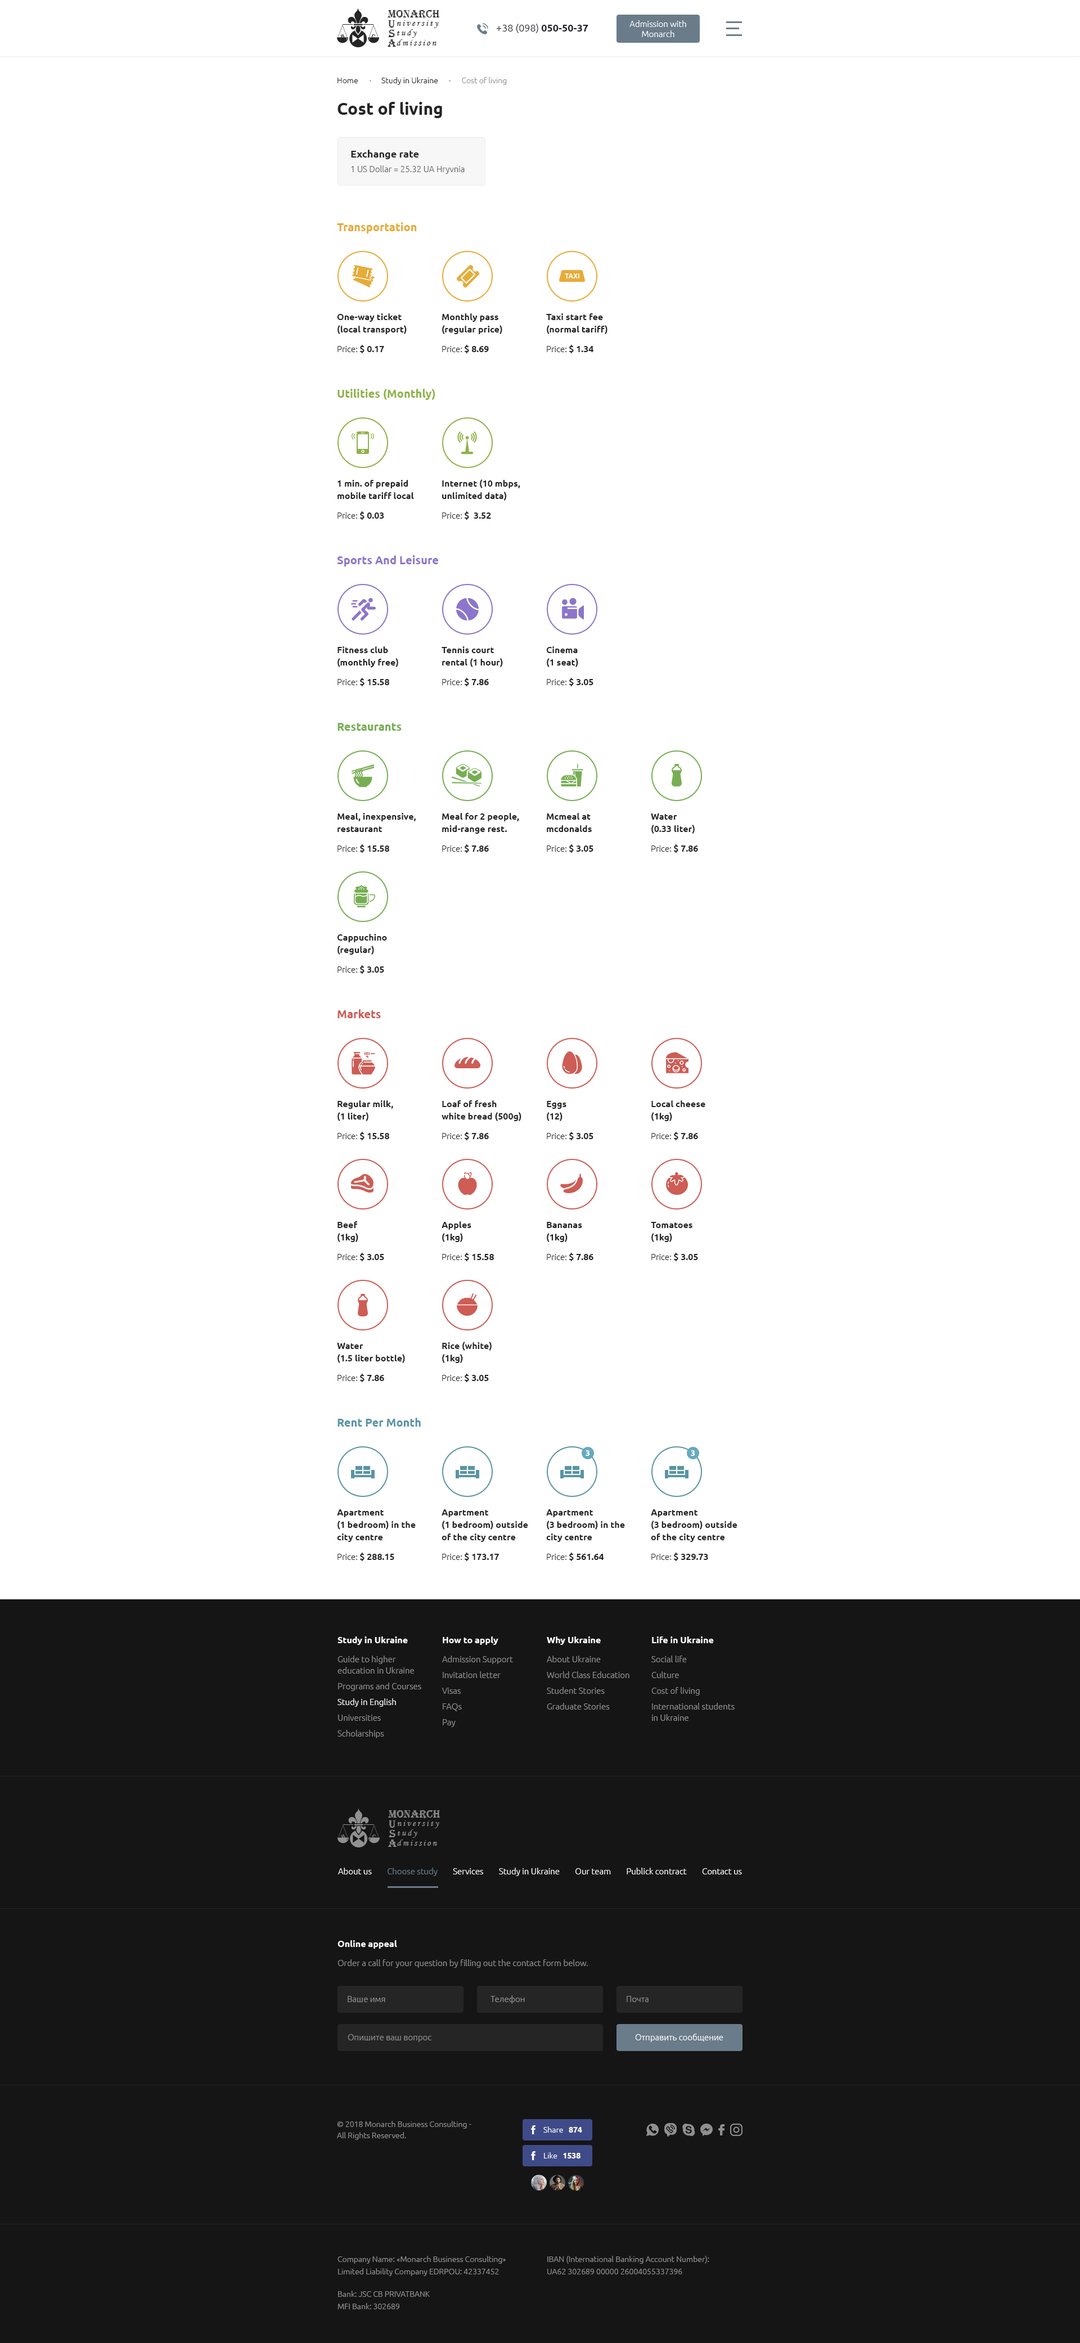
<style>
.page{position:relative;width:1080px;height:2343px;background:#ffffff}
.page>*{position:absolute;margin:0}
.t1{font:11.3px "Algerian";color:#252525}
.t2{font:9px "MonotypeCorsiva";letter-spacing:0.19em;color:#252525}
.t3{font:10.1px "Ubuntu-Light";color:#242028}
.t4{font:10.1px "Ubuntu-Bold";color:#242028}
.t5{font:8.4px/10.1px "Ubuntu-Light";color:#ffffff}
.t6{font:7.9px "Ubuntu-Light";color:#202020}
.t7{font:7.9px "Ubuntu-Light";color:#909090}
.t8{font:16.9px "Ubuntu-Bold";color:#252525}
.t9{font:8.4px/14.6px "Ubuntu-Light";color:#606060}
.t10{font:10.1px/14.6px "Ubuntu-Bold";color:#252525}
.t11{font:11.2px "Ubuntu-Bold";color:#e7ab38}
.t12{font:9px/12.4px "Ubuntu-Bold";color:#252525}
.t13{font:8.4px "Ubuntu-Light";color:#252525}
.t14{font:9px "Ubuntu-Bold";color:#252525}
.t15{font:11.2px "Ubuntu-Bold";color:#90b248}
.t16{font:11.2px "Ubuntu-Bold";color:#8c75cb}
.t17{font:11.2px "Ubuntu-Bold";color:#77ae54}
.t18{font:11.2px "Ubuntu-Bold";color:#cd5d55}
.t19{font:11.2px "Ubuntu-Bold";color:#5995a6}
.t20{font:7.9px "Ubuntu-Bold";color:#ffffff}
.t21{font:8.4px/15.8px "Ubuntu-Light";color:#909090}
.t22{font:9px/11.2px "Ubuntu-Bold";color:#ffffff}
.t23{font:8.4px/19.1px "Ubuntu-Light";color:#909090}
.t24{font:8.4px/11.2px "Ubuntu-Light";color:#909090}
.t25{font:8.4px/15.8px "Ubuntu-Light";color:#ffffff}
.t26{font:11.3px "Algerian";color:#909090}
.t27{font:9px "MonotypeCorsiva";letter-spacing:0.19em;color:#909090}
.t28{font:8.4px "Ubuntu-Light";color:#ffffff}
.t29{font:8.4px "Ubuntu-Light";color:#6a7c8a}
.t30{font:8.4px "Ubuntu-Light";color:#909090}
.t31{font:7.9px/11.2px "Ubuntu-Light";color:#909090}
.t32{font:7.9px "Ubuntu-Light";color:#ffffff}
.t33{font:7.9px/12.4px "Ubuntu-Light";color:#909090}
</style>
<div class="page">
<p class="t1" style="left:388px;top:10px;width:52px;height:9px">MONARCH</p>
<p class="t1" style="left:388px;top:30px;width:7px;height:7px">S</p>
<p class="t1" style="left:388px;top:20px;width:7px;height:8px">U</p>
<p class="t2" style="left:397px;top:20px;width:42px;height:8px">niversity</p>
<p class="t2" style="left:397px;top:29px;width:20px;height:9px">tudy</p>
<p class="t3" style="left:496px;top:24px;width:92px;height:9px">+38 (098) <span class="t4">050-50-37</span></p>
<p class="t5" style="left:629px;top:20px;width:57px;height:17px;text-align:center">Admission with <br>Monarch</p>
<p class="t1" style="left:388px;top:39px;width:9px;height:8px">A</p>
<p class="t2" style="left:397px;top:39px;width:39px;height:7px">dmission</p>
<p class="t6" style="left:338px;top:77px;width:169px;height:8px">Home             Study in Ukraine             <span class="t7">Cost of living</span></p>
<p class="t8" style="left:338px;top:102px;width:104px;height:16px">Cost of living</p>
<p class="t9" style="left:351px;top:150px;width:114px;height:24px"><span class="t10">Exchange rate<br></span>1 US Dollar = 25.32 UA Hryvnia</p>
<p class="t11" style="left:337px;top:222px;width:80px;height:11px">Transportation</p>
<p class="t12" style="left:337px;top:313px;width:70px;height:21px">One-way ticket<br>(local transport)</p>
<p class="t12" style="left:442px;top:313px;width:60px;height:21px">Monthly pass<br>(regular price)</p>
<p class="t12" style="left:546px;top:313px;width:62px;height:21px">Taxi start fee<br>(normal tariff)</p>
<p class="t13" style="left:338px;top:345px;width:46px;height:8px">Price: <span class="t14">$ 0.17</span></p>
<p class="t13" style="left:442px;top:345px;width:47px;height:8px">Price: <span class="t14">$ 8.69</span></p>
<p class="t13" style="left:547px;top:345px;width:46px;height:8px">Price: <span class="t14">$ 1.34</span></p>
<p class="t15" style="left:338px;top:389px;width:97px;height:11px">Utilities (Monthly)</p>
<p class="t12" style="left:338px;top:480px;width:76px;height:19px">1 min. of prepaid<br>mobile tariff local</p>
<p class="t12" style="left:442px;top:479px;width:78px;height:22px">Internet (10 mbps,<br>unlimited data)</p>
<p class="t13" style="left:338px;top:511px;width:46px;height:9px">Price: <span class="t14">$ 0.03</span></p>
<p class="t14" style="left:442px;top:511px;width:49px;height:9px"><span class="t13">Price: </span>$  3.52</p>
<p class="t16" style="left:337px;top:555px;width:101px;height:11px">Sports And Leisure</p>
<p class="t12" style="left:338px;top:646px;width:60px;height:21px">Fitness club<br>(monthly free)</p>
<p class="t12" style="left:442px;top:646px;width:61px;height:21px">Tennis court<br>rental (1 hour)</p>
<p class="t12" style="left:546px;top:646px;width:32px;height:21px">Cinema<br>(1 seat)</p>
<p class="t14" style="left:338px;top:678px;width:51px;height:8px"><span class="t13">Price: </span>$ 15.58</p>
<p class="t13" style="left:442px;top:678px;width:47px;height:8px">Price: <span class="t14">$ 7.86</span></p>
<p class="t13" style="left:547px;top:678px;width:46px;height:8px">Price: <span class="t14">$ 3.05</span></p>
<p class="t17" style="left:338px;top:723px;width:64px;height:8px">Restaurants</p>
<p class="t12" style="left:338px;top:813px;width:78px;height:19px">Meal, inexpensive,<br>restaurant</p>
<p class="t12" style="left:442px;top:813px;width:77px;height:21px">Meal for 2 people,<br>mid-range rest.</p>
<p class="t12" style="left:547px;top:813px;width:45px;height:19px">Mcmeal at<br>mcdonalds</p>
<p class="t12" style="left:651px;top:813px;width:44px;height:21px">Water<br>(0.33 liter)</p>
<p class="t14" style="left:338px;top:844px;width:51px;height:9px"><span class="t13">Price: </span>$ 15.58</p>
<p class="t13" style="left:442px;top:844px;width:47px;height:9px">Price: <span class="t14">$ 7.86</span></p>
<p class="t13" style="left:547px;top:844px;width:46px;height:9px">Price: <span class="t14">$ 3.05</span></p>
<p class="t13" style="left:651px;top:844px;width:47px;height:9px">Price: <span class="t14">$ 7.86</span></p>
<p class="t12" style="left:337px;top:934px;width:50px;height:21px">Cappuchino<br>(regular)</p>
<p class="t13" style="left:338px;top:965px;width:46px;height:9px">Price: <span class="t14">$ 3.05</span></p>
<p class="t18" style="left:338px;top:1009px;width:43px;height:9px">Markets</p>
<p class="t12" style="left:338px;top:1100px;width:55px;height:21px">Regular milk,<br>(1 liter)</p>
<p class="t12" style="left:442px;top:1100px;width:79px;height:21px">Loaf of fresh<br>white bread (500g)</p>
<p class="t12" style="left:547px;top:1101px;width:19px;height:20px">Eggs <br>(12)</p>
<p class="t12" style="left:651px;top:1100px;width:54px;height:21px">Local cheese<br>(1kg)</p>
<p class="t14" style="left:338px;top:1132px;width:51px;height:8px"><span class="t13">Price: </span>$ 15.58</p>
<p class="t13" style="left:442px;top:1132px;width:47px;height:8px">Price: <span class="t14">$ 7.86</span></p>
<p class="t13" style="left:547px;top:1132px;width:46px;height:8px">Price: <span class="t14">$ 3.05</span></p>
<p class="t13" style="left:651px;top:1132px;width:47px;height:8px">Price: <span class="t14">$ 7.86</span></p>
<p class="t12" style="left:338px;top:1221px;width:20px;height:21px">Beef<br>(1kg)</p>
<p class="t12" style="left:442px;top:1221px;width:29px;height:21px">Apples<br>(1kg)</p>
<p class="t12" style="left:547px;top:1222px;width:35px;height:20px">Bananas<br>(1kg)</p>
<p class="t12" style="left:651px;top:1222px;width:41px;height:20px">Tomatoes<br>(1kg)</p>
<p class="t13" style="left:338px;top:1253px;width:46px;height:8px">Price: <span class="t14">$ 3.05</span></p>
<p class="t14" style="left:442px;top:1253px;width:52px;height:8px"><span class="t13">Price: </span>$ 15.58</p>
<p class="t13" style="left:547px;top:1253px;width:46px;height:8px">Price: <span class="t14">$ 7.86</span></p>
<p class="t13" style="left:651px;top:1253px;width:47px;height:8px">Price: <span class="t14">$ 3.05</span></p>
<p class="t12" style="left:337px;top:1343px;width:68px;height:20px">Water <br>(1.5 liter bottle)</p>
<p class="t12" style="left:442px;top:1342px;width:50px;height:21px">Rice (white)<br>(1kg)</p>
<p class="t13" style="left:338px;top:1374px;width:46px;height:8px">Price: <span class="t14">$ 7.86</span></p>
<p class="t13" style="left:442px;top:1374px;width:47px;height:8px">Price: <span class="t14">$ 3.05</span></p>
<p class="t19" style="left:338px;top:1418px;width:83px;height:8px">Rent Per Month</p>
<p class="t20" style="left:586px;top:1450px;width:4px;height:6px">3</p>
<p class="t20" style="left:691px;top:1450px;width:4px;height:6px">3</p>
<p class="t12" style="left:337px;top:1509px;width:79px;height:33px">Apartment <br>(1 bedroom) in the city centre</p>
<p class="t12" style="left:442px;top:1509px;width:86px;height:33px">Apartment <br>(1 bedroom) outside of the city centre</p>
<p class="t12" style="left:546px;top:1509px;width:79px;height:33px">Apartment <br>(3 bedroom) in the city centre</p>
<p class="t12" style="left:651px;top:1509px;width:86px;height:33px">Apartment <br>(3 bedroom) outside of the city centre</p>
<p class="t14" style="left:338px;top:1552px;width:56px;height:9px"><span class="t13">Price: </span>$ 288.15</p>
<p class="t14" style="left:442px;top:1552px;width:57px;height:9px"><span class="t13">Price: </span>$ 173.17</p>
<p class="t14" style="left:547px;top:1552px;width:57px;height:9px"><span class="t13">Price: </span>$ 561.64</p>
<p class="t14" style="left:651px;top:1552px;width:57px;height:9px"><span class="t13">Price: </span>$ 329.73</p>
<p class="t21" style="left:338px;top:1636px;width:83px;height:102px"><span class="t22">Study in Ukraine<br></span><span class="t23">Guide to higher <br></span><span class="t24">education in Ukraine<br></span>Programs and Courses<br><span class="t25">Study in English<br></span>Universities<br>Scholarships</p>
<p class="t21" style="left:442px;top:1636px;width:71px;height:91px"><span class="t22">How to apply<br></span><span class="t23">Admission Support<br></span>Invitation letter<br>Visas<br>FAQs<br>Pay</p>
<p class="t21" style="left:547px;top:1636px;width:82px;height:73px"><span class="t22">Why Ukraine<br></span><span class="t23">About Ukraine<br></span>World Class Education<br>Student Stories<br>Graduate Stories</p>
<p class="t21" style="left:651px;top:1636px;width:84px;height:85px"><span class="t22">Life in Ukraine<br></span><span class="t23">Social life<br></span>Culture<br>Cost of living<br>International students <br><span class="t24">in Ukraine</span></p>
<p class="t26" style="left:388px;top:1810px;width:52px;height:9px">MONARCH</p>
<p class="t26" style="left:389px;top:1830px;width:6px;height:7px">S</p>
<p class="t26" style="left:389px;top:1820px;width:6px;height:8px">U</p>
<p class="t27" style="left:397px;top:1820px;width:42px;height:8px">niversity</p>
<p class="t27" style="left:398px;top:1829px;width:19px;height:9px">tudy</p>
<p class="t26" style="left:388px;top:1839px;width:9px;height:8px">A</p>
<p class="t27" style="left:397px;top:1839px;width:40px;height:7px">dmission</p>
<p class="t28" style="left:338px;top:1868px;width:404px;height:8px">About us        <span class="t29">Choose study</span>        Services        Study in Ukraine        Our team        Publick contract        Contact us</p>
<p class="t23" style="left:338px;top:1940px;width:250px;height:28px"><span class="t22">Online appeal<br></span>Order a call for your question by filling out the contact form below.</p>
<p class="t30" style="left:348px;top:1996px;width:37px;height:6px">Ваше имя</p>
<p class="t30" style="left:490px;top:1995px;width:35px;height:9px">Телефон</p>
<p class="t30" style="left:627px;top:1996px;width:22px;height:6px">Почта</p>
<p class="t28" style="left:635px;top:2033px;width:88px;height:9px">Отправить сообщение</p>
<p class="t30" style="left:348px;top:2034px;width:83px;height:8px">Опишите ваш вопрос</p>
<p class="t31" style="left:337px;top:2121px;width:134px;height:19px">© 2018 Monarch Business Consulting - <br>All Rights Reserved.</p>
<p class="t32" style="left:543px;top:2126px;width:39px;height:6px">Share   <span class="t20">874</span></p>
<p class="t32" style="left:544px;top:2152px;width:36px;height:6px">Like   <span class="t20">1538</span></p>
<p class="t33" style="left:338px;top:2256px;width:168px;height:20px">Company Name: «Monarch Business Consulting»<br>Limited Liability Company EDRPOU: 42337452</p>
<p class="t33" style="left:547px;top:2256px;width:162px;height:18px">IBAN (International Banking Account Number): <br>UA62 302689 00000 26004055337396</p>
<p class="t33" style="left:338px;top:2290px;width:92px;height:19px">Bank: JSC CB PRIVATBANK<br>MFI Bank: 302689</p>
</div>
